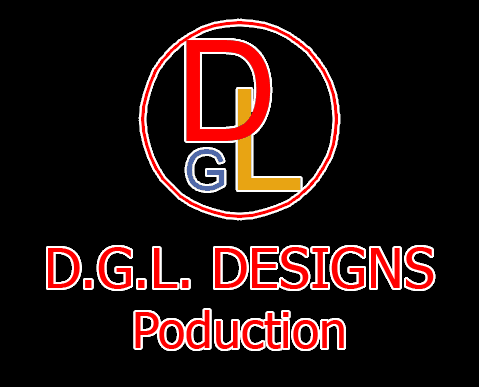
<style>
.page{position:relative;width:479px;height:387px;background:#000000}
.page>*{position:absolute;margin:0}
.t1{font:55px "Tahoma";color:#ff0000}
.t2{font:50px "Tahoma";color:#ff0000}
</style>
<div class="page">
<p class="t1" style="left:48px;top:247px;width:386px;height:102px;text-align:center">D.G.L. DESIGNS<br><span class="t2">Poduction</span></p>
</div>
